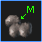
<style>
.page{position:relative;width:42px;height:42px;background:#1c1c1c}
.page>*{position:absolute;margin:0}
.t1{font:10px "Verdana";color:#24ff00}
</style>
<div class="page">
<p class="t1" style="left:27px;top:6px;width:7px;height:7px">M</p>
</div>
